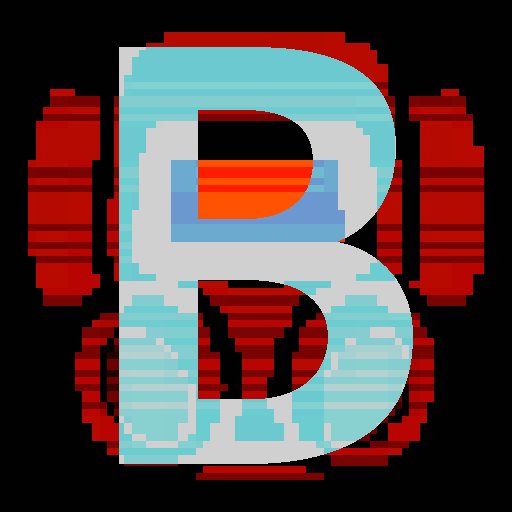
<style>
.page{position:relative;width:512px;height:512px;background:#010101}
.page>*{position:absolute;margin:0}
.t1{font:651.7px "Consolas-Bold"}
</style>
<div class="page">
<p class="t1" style="left:119px;top:47px;width:294px;height:417px">B</p>
</div>
